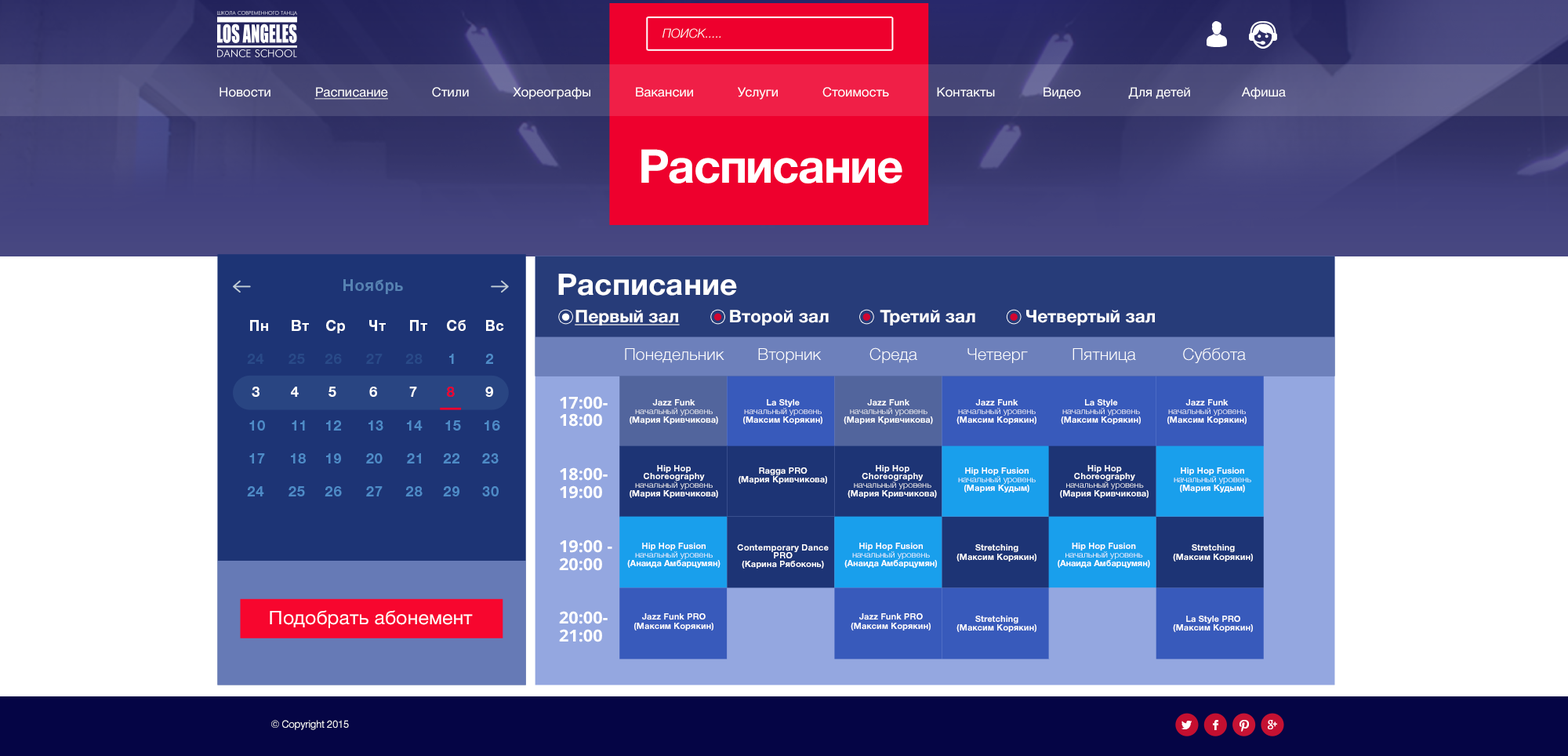
<style>
.page{position:relative;width:1568px;height:756px}
.page>*{position:absolute;margin:0}
.t1{font:12.3px "HelveticaNeueCyr-LightItalic";color:#ffffff;text-transform:uppercase}
.t2{font:12.7px "HelveticaNeueCyr-Roman";color:#ffffff;scale:1.03 1}
.t3{font:12.7px "HelveticaNeueCyr-Roman";color:#ffffff;text-decoration:underline;scale:1.03 1}
.t4{font:46.6px "HelveticaNeueCyr-Bold";letter-spacing:-0.025em;color:#ffffff}
.t5{font:15.5px "HelveticaNeueCyr-Bold";letter-spacing:0.04em;color:#5682b2}
.t6{font:29.7px "HelveticaNeueCyr-Bold";color:#ffffff;scale:1.03 1}
.t7{font:17.5px "HelveticaNeueCyr-Bold";color:#ffffff;text-decoration:underline}
.t8{font:17.5px "HelveticaNeueCyr-Bold";color:#ffffff}
.t9{font:14.4px "HelveticaNeueCyr-Bold";letter-spacing:0.04em;color:#ffffff}
.t10{font:14.4px "HelveticaNeueCyr-Bold";letter-spacing:0.04em;color:#294a88}
.t11{font:14.4px "HelveticaNeueCyr-Bold";letter-spacing:0.04em;color:#4e8bc7}
.t12{font:16.4px "HelveticaNeueCyr-Light";color:#ffffff}
.t13{font:14.4px "HelveticaNeueCyr-Bold";letter-spacing:0.04em;color:#ee002d}
.t14{font:16.4px/15.9px "OpenSans-Bold";color:#ffffff;scale:1.03 1}
.t15{font:8.6px/7.4px "HelveticaNeueCyr-Bold";color:#ffffff;scale:1.03 1}
.t16{font:8.6px/7.4px "HelveticaNeueCyr-Light";color:#ffffff;scale:1.03 1}
.t17{font:18.8px "HelveticaNeueCyr-Roman";color:#ffffff;scale:1.04 1}
.t18{font:10.3px "HelveticaNeueCyr-Roman";letter-spacing:-0.025em;color:#ffffff}
</style>
<div class="page">
<p class="t1" style="left:662px;top:28px;width:59px;height:10px">ПОИСК.....</p>
<p class="t2" style="left:220px;top:87px;width:1066px;height:13px">Новости            <span class="t3">Расписание</span>            Стили            Хореографы            Вакансии            Услуги            Стоимость             Контакты             Видео             Для детей              Афиша</p>
<p class="t4" style="left:641px;top:149px;width:261px;height:34px">Расписание</p>
<p class="t5" style="left:343px;top:279px;width:60px;height:15px">Ноябрь</p>
<p class="t6" style="left:558px;top:274px;width:179px;height:22px">Расписание</p>
<p class="t7" style="left:575px;top:310px;width:105px;height:15px">Первый зал</p>
<p class="t8" style="left:730px;top:310px;width:99px;height:15px">Второй зал</p>
<p class="t8" style="left:880px;top:310px;width:95px;height:15px">Третий зал</p>
<p class="t8" style="left:1026px;top:310px;width:129px;height:15px">Четвертый зал</p>
<p class="t9" style="left:250px;top:320px;width:18px;height:11px">Пн</p>
<p class="t9" style="left:292px;top:320px;width:17px;height:11px">Вт</p>
<p class="t9" style="left:326px;top:320px;width:19px;height:13px">Ср</p>
<p class="t9" style="left:369px;top:320px;width:17px;height:11px">Чт</p>
<p class="t9" style="left:410px;top:320px;width:17px;height:11px">Пт</p>
<p class="t9" style="left:447px;top:320px;width:19px;height:11px">Сб</p>
<p class="t9" style="left:486px;top:320px;width:18px;height:11px">Вс</p>
<p class="t10" style="left:247px;top:354px;width:17px;height:10px">24</p>
<p class="t10" style="left:289px;top:354px;width:16px;height:10px">25</p>
<p class="t10" style="left:325px;top:354px;width:17px;height:10px">26</p>
<p class="t10" style="left:366px;top:354px;width:17px;height:10px">27</p>
<p class="t10" style="left:405px;top:354px;width:18px;height:10px">28</p>
<p class="t11" style="left:449px;top:354px;width:5px;height:10px">1</p>
<p class="t11" style="left:485px;top:354px;width:8px;height:10px">2</p>
<p class="t12" style="left:625px;top:348px;width:99px;height:15px">Понедельник</p>
<p class="t12" style="left:758px;top:348px;width:64px;height:15px">Вторник</p>
<p class="t12" style="left:869px;top:347px;width:48px;height:16px">Среда</p>
<p class="t12" style="left:967px;top:348px;width:61px;height:15px">Четверг</p>
<p class="t12" style="left:1073px;top:348px;width:63px;height:15px">Пятница</p>
<p class="t12" style="left:1183px;top:347px;width:63px;height:16px">Суббота</p>
<p class="t9" style="left:252px;top:387px;width:8px;height:10px">3</p>
<p class="t9" style="left:291px;top:387px;width:8px;height:10px">4</p>
<p class="t9" style="left:328px;top:387px;width:8px;height:10px">5</p>
<p class="t9" style="left:369px;top:387px;width:8px;height:10px">6</p>
<p class="t9" style="left:409px;top:387px;width:8px;height:10px">7</p>
<p class="t13" style="left:447px;top:387px;width:8px;height:10px">8</p>
<p class="t9" style="left:485px;top:387px;width:8px;height:10px">9</p>
<p class="t14" style="left:559px;top:396px;width:53px;height:246px">17:00-<br>18:00 <br>     <br><br>18:00-<br>19:00  <br><br><br>19:00 -    <br>20:00<br><br><br>20:00-<br>21:00</p>
<p class="t15" style="left:630px;top:399px;width:88px;height:25px;text-align:center">Jazz Funk<br><span class="t16">начальный уровень<br></span>(Мария Кривчикова)</p>
<p class="t16" style="left:743px;top:399px;width:79px;height:25px;text-align:center"><span class="t15">La Style<br></span>начальный уровень<br><span class="t15">(Максим Корякин)</span></p>
<p class="t15" style="left:844px;top:399px;width:89px;height:25px;text-align:center">Jazz Funk<br><span class="t16">начальный уровень<br></span>(Мария Кривчикова)</p>
<p class="t16" style="left:956px;top:399px;width:80px;height:25px;text-align:center"><span class="t15">Jazz Funk<br></span>начальный уровень<br><span class="t15">(Максим Корякин)</span></p>
<p class="t16" style="left:1061px;top:399px;width:80px;height:25px;text-align:center"><span class="t15">La Style<br></span>начальный уровень<br><span class="t15">(Максим Корякин)</span></p>
<p class="t16" style="left:1167px;top:399px;width:80px;height:25px;text-align:center"><span class="t15">Jazz Funk<br></span>начальный уровень<br><span class="t15">(Максим Корякин)</span></p>
<p class="t11" style="left:249px;top:420px;width:16px;height:10px">10</p>
<p class="t11" style="left:292px;top:420px;width:13px;height:10px">11</p>
<p class="t11" style="left:326px;top:420px;width:15px;height:10px">12</p>
<p class="t11" style="left:368px;top:420px;width:15px;height:10px">13</p>
<p class="t11" style="left:407px;top:420px;width:16px;height:10px">14</p>
<p class="t11" style="left:445px;top:420px;width:16px;height:10px">15</p>
<p class="t11" style="left:485px;top:420px;width:15px;height:10px">16</p>
<p class="t11" style="left:249px;top:453px;width:16px;height:10px">17</p>
<p class="t11" style="left:291px;top:453px;width:15px;height:10px">18</p>
<p class="t11" style="left:326px;top:453px;width:15px;height:10px">19</p>
<p class="t11" style="left:366px;top:453px;width:17px;height:10px">20</p>
<p class="t11" style="left:407px;top:453px;width:14px;height:10px">21</p>
<p class="t11" style="left:443px;top:453px;width:16px;height:10px">22</p>
<p class="t11" style="left:482px;top:453px;width:17px;height:10px">23</p>
<p class="t15" style="left:630px;top:465px;width:88px;height:33px;text-align:center">Hip Hop Choreography<br><span class="t16">начальный уровень<br></span>(Мария Кривчикова)</p>
<p class="t15" style="left:739px;top:467px;width:88px;height:17px;text-align:center">Ragga PRO<br>(Мария Кривчикова)</p>
<p class="t15" style="left:848px;top:465px;width:89px;height:33px;text-align:center">Hip Hop Choreography<br><span class="t16">начальный уровень<br></span>(Мария Кривчикова)</p>
<p class="t16" style="left:958px;top:467px;width:78px;height:25px;text-align:center"><span class="t15">Hip Hop Fusion<br></span>начальный уровень<br><span class="t15">(Мария Кудым)</span></p>
<p class="t15" style="left:1060px;top:465px;width:89px;height:33px;text-align:center">Hip Hop Choreography<br><span class="t16">начальный уровень<br></span>(Мария Кривчикова)</p>
<p class="t16" style="left:1174px;top:467px;width:77px;height:25px;text-align:center"><span class="t15">Hip Hop Fusion<br></span>начальный уровень<br><span class="t15">(Мария Кудым)</span></p>
<p class="t11" style="left:247px;top:486px;width:17px;height:10px">24</p>
<p class="t11" style="left:289px;top:486px;width:16px;height:10px">25</p>
<p class="t11" style="left:325px;top:486px;width:17px;height:10px">26</p>
<p class="t11" style="left:366px;top:486px;width:17px;height:10px">27</p>
<p class="t11" style="left:405px;top:486px;width:18px;height:10px">28</p>
<p class="t11" style="left:443px;top:486px;width:16px;height:10px">29</p>
<p class="t11" style="left:482px;top:486px;width:17px;height:10px">30</p>
<p class="t15" style="left:627px;top:543px;width:93px;height:25px;text-align:center">Hip Hop Fusion<br><span class="t16">начальный уровень<br></span>(Анаида Амбарцумян)</p>
<p class="t15" style="left:737px;top:544px;width:92px;height:24px;text-align:center">Contemporary Dance PRO<br>(Карина Рябоконь)</p>
<p class="t15" style="left:844px;top:543px;width:93px;height:25px;text-align:center">Hip Hop Fusion<br><span class="t16">начальный уровень<br></span>(Анаида Амбарцумян)</p>
<p class="t15" style="left:956px;top:544px;width:80px;height:17px;text-align:center">Stretching<br>(Максим Корякин)</p>
<p class="t15" style="left:1058px;top:543px;width:92px;height:25px;text-align:center">Hip Hop Fusion<br><span class="t16">начальный уровень<br></span>(Анаида Амбарцумян)</p>
<p class="t15" style="left:1173px;top:544px;width:80px;height:17px;text-align:center">Stretching<br>(Максим Корякин)</p>
<p class="t17" style="left:270px;top:610px;width:203px;height:18px">Подобрать абонемент</p>
<p class="t15" style="left:634px;top:613px;width:79px;height:17px;text-align:center">Jazz Funk PRO<br>(Максим Корякин)</p>
<p class="t15" style="left:851px;top:613px;width:80px;height:17px;text-align:center">Jazz Funk PRO<br>(Максим Корякин)</p>
<p class="t15" style="left:956px;top:615px;width:80px;height:17px;text-align:center">Stretching<br>(Максим Корякин)</p>
<p class="t15" style="left:1173px;top:615px;width:80px;height:17px;text-align:center">La Style PRO<br>(Максим Корякин)</p>
<p class="t18" style="left:271px;top:720px;width:78px;height:10px">© Copyright 2015</p>
</div>
